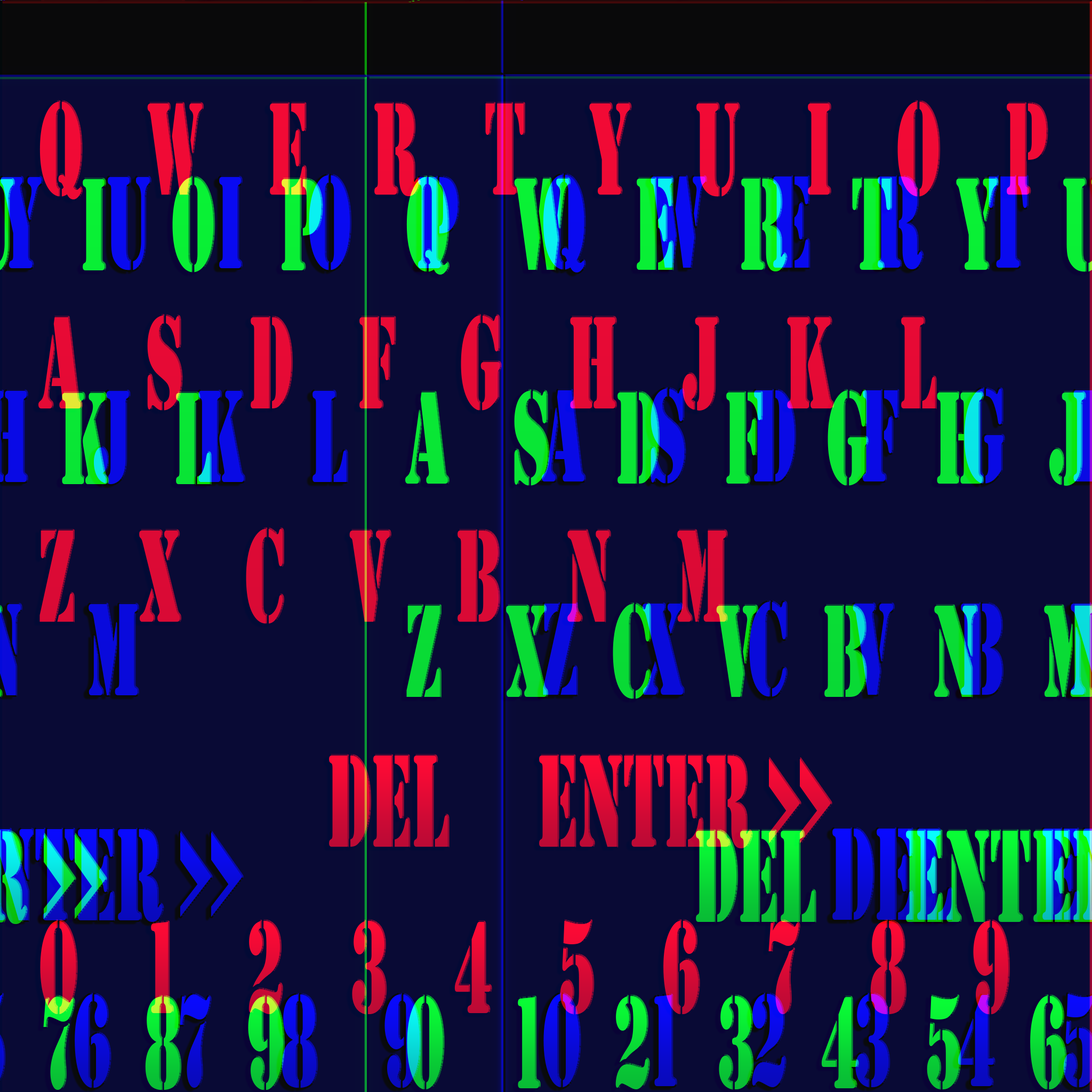
<style>
.page{position:relative;width:1092px;height:1092px;background:#090a35}
.page>*{position:absolute;margin:0}
.t1{font:136.5px/213.3px "Stencil";letter-spacing:0.937em;color:#e70a35;scale:0.5 1}
.t2{font:136.5px "Stencil";scale:0.5 1}
.t3{font:150.1px "Stencil";scale:0.48 1}
.t4{font:136.5px "Stencil";letter-spacing:0.937em;scale:0.5 1}
</style>
<div class="page">
<p class="t1" style="left:38px;top:100px;width:1009px;height:523px">QWERTYUIOP<br>ASDFGHJKL<br>ZXCVBNM</p>
<p class="t2" style="left:329px;top:754px;width:502px;height:93px">DEL    ENTER <span class="t3">&gt;&gt;</span></p>
<p class="t4" style="left:40px;top:919px;width:968px;height:95px">0123456789</p>
</div>
